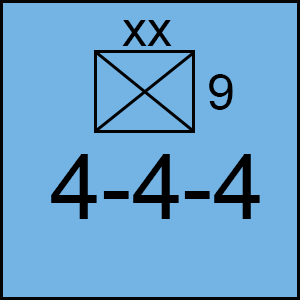
<style>
.page{position:relative;width:300px;height:300px;background:#74b4e4}
.page>*{position:absolute;margin:0}
.t1{font:50px "ArialMT";color:#000000}
.t2{font:91.7px "ArialMT";color:#000000}
</style>
<div class="page">
<p class="t1" style="left:122px;top:20px;width:50px;height:26px">xx</p>
<p class="t1" style="left:209px;top:74px;width:24px;height:36px">9</p>
<p class="t2" style="left:51px;top:154px;width:209px;height:65px">4-4-4</p>
</div>
